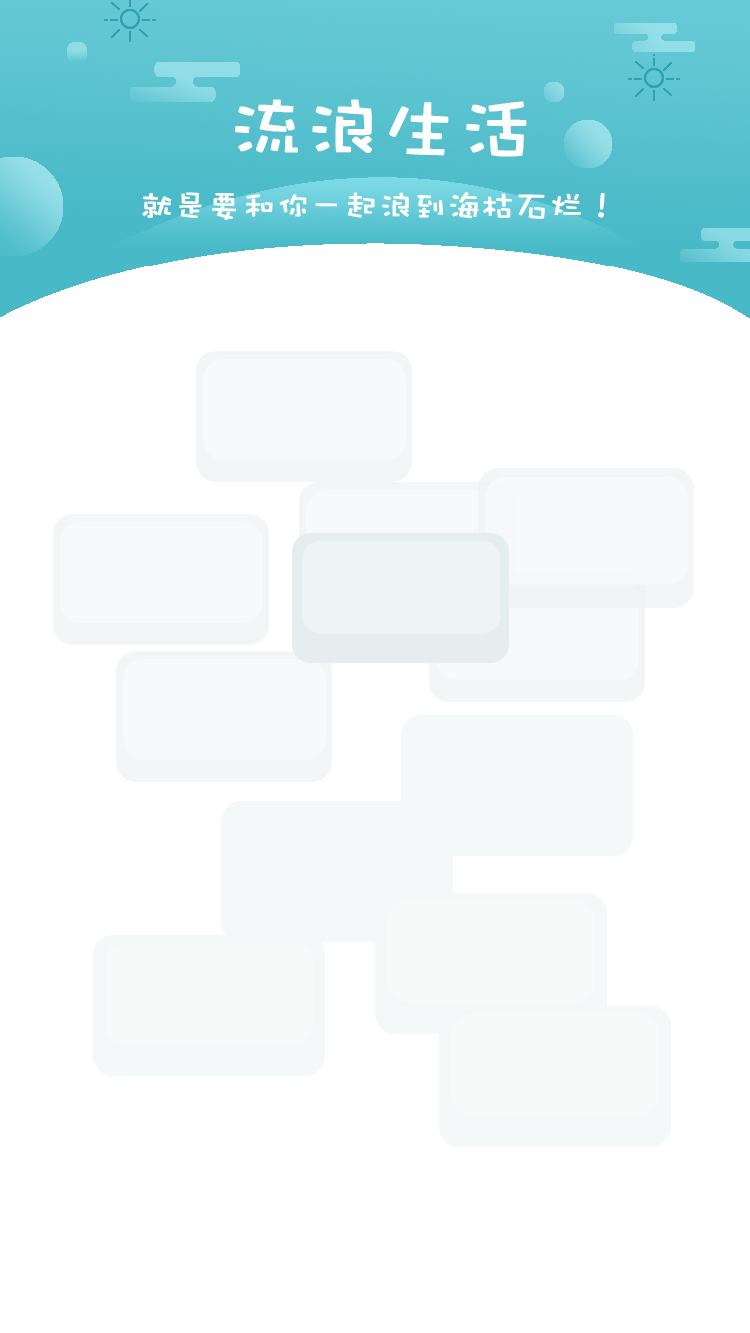
<style>
.page{position:relative;width:750px;height:1333px;background:#ffffff}
.page>*{position:absolute;margin:0}
.t1{font:75px "DFPWaWaW5";color:#ffffff;font-weight:bold}
.t2{font:33.3px "DFPWaWaW5";color:#fefefe;font-weight:bold}
</style>
<div class="page">
<p class="t1" style="left:235px;top:99px;width:292px;height:58px">流浪生活</p>
<p class="t2" style="left:142px;top:192px;width:463px;height:28px">就是要和你一起浪到海枯石烂！</p>
</div>
